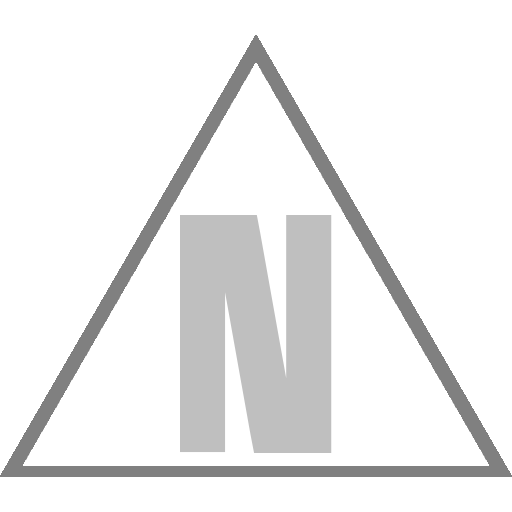
<style>
.page{position:relative;width:512px;height:512px;background:#ffffff}
.page>*{position:absolute;margin:0}
.t1{font:300px "Badang";color:#bfbfbf}
</style>
<div class="page">
<p class="t1" style="left:180px;top:215px;width:152px;height:238px">N</p>
</div>
